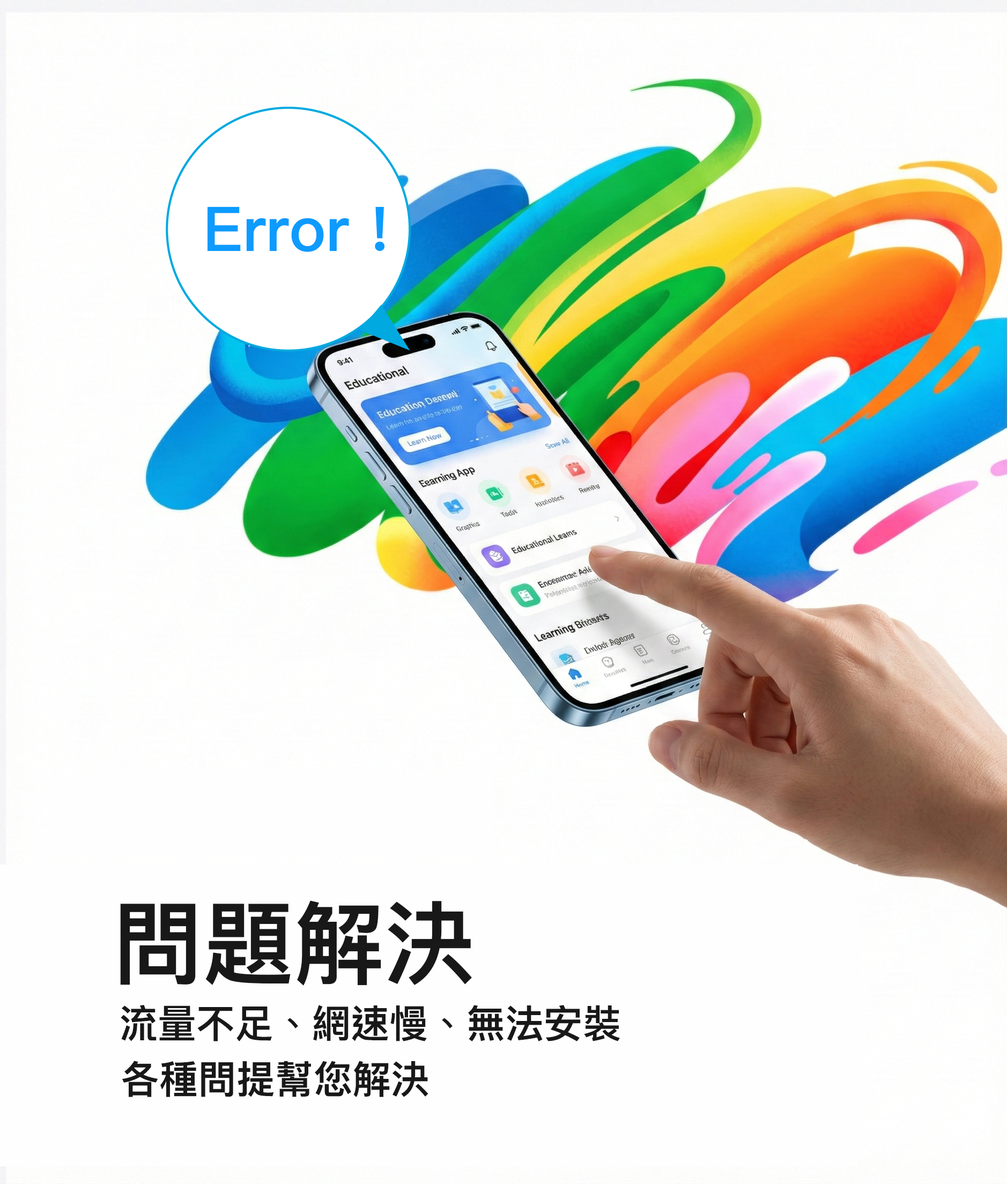
<style>
.page{position:relative;width:1007px;height:1184px;background:#fefefe}
.page>*{position:absolute;margin:0}
.t1{font:61.7px "PingFangHK-Semibold";color:#0d9bff}
.t2{font:90.6px "PingFangHK-Semibold";color:#181818}
.t3{font:38.7px "PingFangHK-Semibold";color:#181818}
</style>
<div class="page">
<p class="t1" style="left:208px;top:206px;width:177px;height:46px">Error !</p>
<p class="t2" style="left:120px;top:900px;width:352px;height:86px">問題解決</p>
<p class="t3" style="left:121px;top:1005px;width:499px;height:36px">流量不足、網速慢、無法安裝</p>
<p class="t3" style="left:122px;top:1061px;width:306px;height:36px">各種問提幫您解決</p>
</div>
